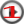
<style>
.page{position:relative;width:24px;height:24px}
.page>*{position:absolute;margin:0}
.t1{font:18.7px "Calibri";color:#e01212;scale:2.41 1}
</style>
<div class="page">
<p class="t1" style="left:3px;top:6px;width:18px;height:12px">1</p>
</div>
